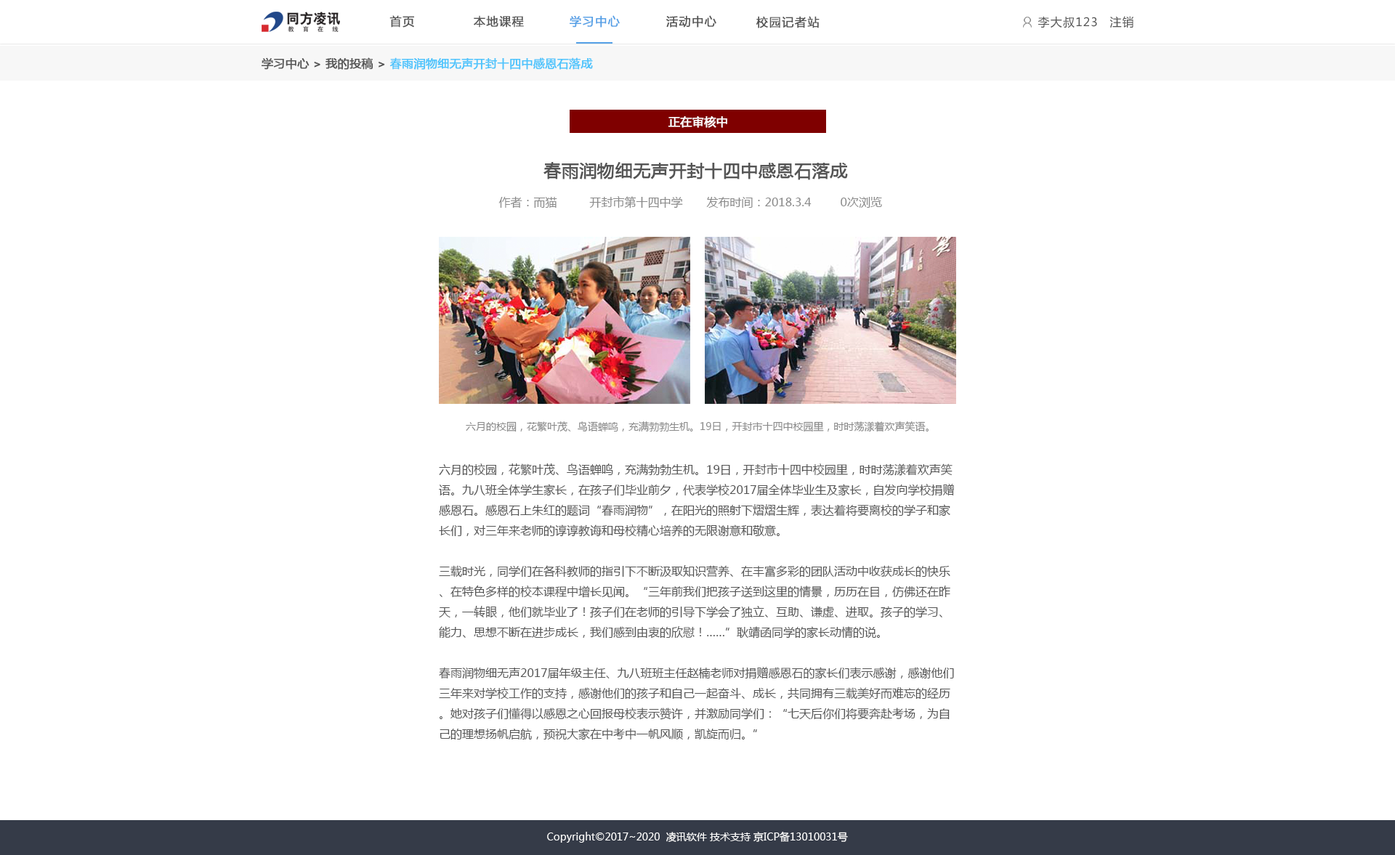
<style>
.page{position:relative;width:1395px;height:855px;background:#ffffff}
.page>*{position:absolute;margin:0}
.t1{font:11.6px "MicrosoftYaHei";letter-spacing:0.075em;color:#555555;font-weight:bold}
.t2{font:11.6px "MicrosoftYaHei";letter-spacing:0.075em;color:#54a0e6;font-weight:bold}
.t3{font:11.6px "MicrosoftYaHei";letter-spacing:0.075em;color:#555555}
.t4{font:11.6px "MicrosoftYaHei";color:#4dc4fc;font-weight:bold}
.t5{font:11.6px "MicrosoftYaHei";color:#555555;font-weight:bold}
.t6{font:11.6px "MicrosoftYaHei";color:#ffffff;font-weight:bold}
.t7{font:17.4px "MicrosoftYaHei";color:#555555;font-weight:bold}
.t8{font:11.6px "MicrosoftYaHei";color:#8a8a8a}
.t9{font:10.2px "MicrosoftYaHei";color:#8a8a8a}
.t10{font:11.6px "MicrosoftYaHei";color:#555555}
.t11{font:10.2px "MicrosoftYaHei";color:#ffffff}
</style>
<div class="page">
<p class="t1" style="left:389px;top:15px;width:25px;height:13px">首页</p>
<p class="t1" style="left:474px;top:15px;width:50px;height:13px">本地课程</p>
<p class="t2" style="left:570px;top:15px;width:50px;height:13px">学习中心</p>
<p class="t1" style="left:666px;top:15px;width:50px;height:13px">活动中心</p>
<p class="t1" style="left:756px;top:16px;width:63px;height:12px">校园记者站</p>
<p class="t3" style="left:1037px;top:16px;width:60px;height:12px">李大叔123</p>
<p class="t3" style="left:1109px;top:16px;width:24px;height:12px">注销</p>
<p class="t4" style="left:261px;top:57px;width:332px;height:13px"><span class="t5">学习中心 &gt; 我的投稿 &gt;</span> 春雨润物细无声开封十四中感恩石落成</p>
<p class="t6" style="left:668px;top:116px;width:59px;height:12px">正在审核中</p>
<p class="t7" style="left:543px;top:162px;width:305px;height:18px">春雨润物细无声开封十四中感恩石落成</p>
<p class="t8" style="left:498px;top:196px;width:59px;height:12px">作者：而猫</p>
<p class="t8" style="left:589px;top:196px;width:94px;height:12px">开封市第十四中学</p>
<p class="t8" style="left:706px;top:197px;width:105px;height:11px">发布时间：2018.3.4</p>
<p class="t8" style="left:840px;top:197px;width:42px;height:11px">0次浏览</p>
<p class="t9" style="left:466px;top:421px;width:462px;height:11px">六月的校园，花繁叶茂、鸟语蝉鸣，充满勃勃生机。19日，开封市十四中校园里，时时荡漾着欢声笑语。</p>
<p class="t10" style="left:439px;top:463px;width:515px;height:277px">六月的校园，花繁叶茂、鸟语蝉鸣，充满勃勃生机。19日，开封市十四中校园里，时时荡漾着欢声笑语。九八班全体学生家长，在孩子们毕业前夕，代表学校2017届全体毕业生及家长，自发向学校捐赠感恩石。感恩石上朱红的题词“春雨润物”，在阳光的照射下熠熠生辉，表达着将要离校的学子和家长们，对三年来老师的谆谆教诲和母校精心培养的无限谢意和敬意。<br><br>三载时光，同学们在各科教师的指引下不断汲取知识营养、在丰富多彩的团队活动中收获成长的快乐、在特色多样的校本课程中增长见闻。“三年前我们把孩子送到这里的情景，历历在目，仿佛还在昨天，一转眼，他们就毕业了！孩子们在老师的引导下学会了独立、互助、谦虚、进取。孩子的学习、能力、思想不断在进步成长，我们感到由衷的欣慰！……”耿靖函同学的家长动情的说。<br><br>春雨润物细无声2017届年级主任、九八班班主任赵楠老师对捐赠感恩石的家长们表示感谢，感谢他们三年来对学校工作的支持，感谢他们的孩子和自己一起奋斗、成长，共同拥有三载美好而难忘的经历。她对孩子们懂得以感恩之心回报母校表示赞许，并激励同学们：“七天后你们将要奔赴考场，为自己的理想扬帆启航，预祝大家在中考中一帆风顺，凯旋而归。”</p>
<p class="t11" style="left:547px;top:831px;width:301px;height:12px">Copyright©2017~2020  凌讯软件 技术支持 京ICP备13010031号</p>
</div>
